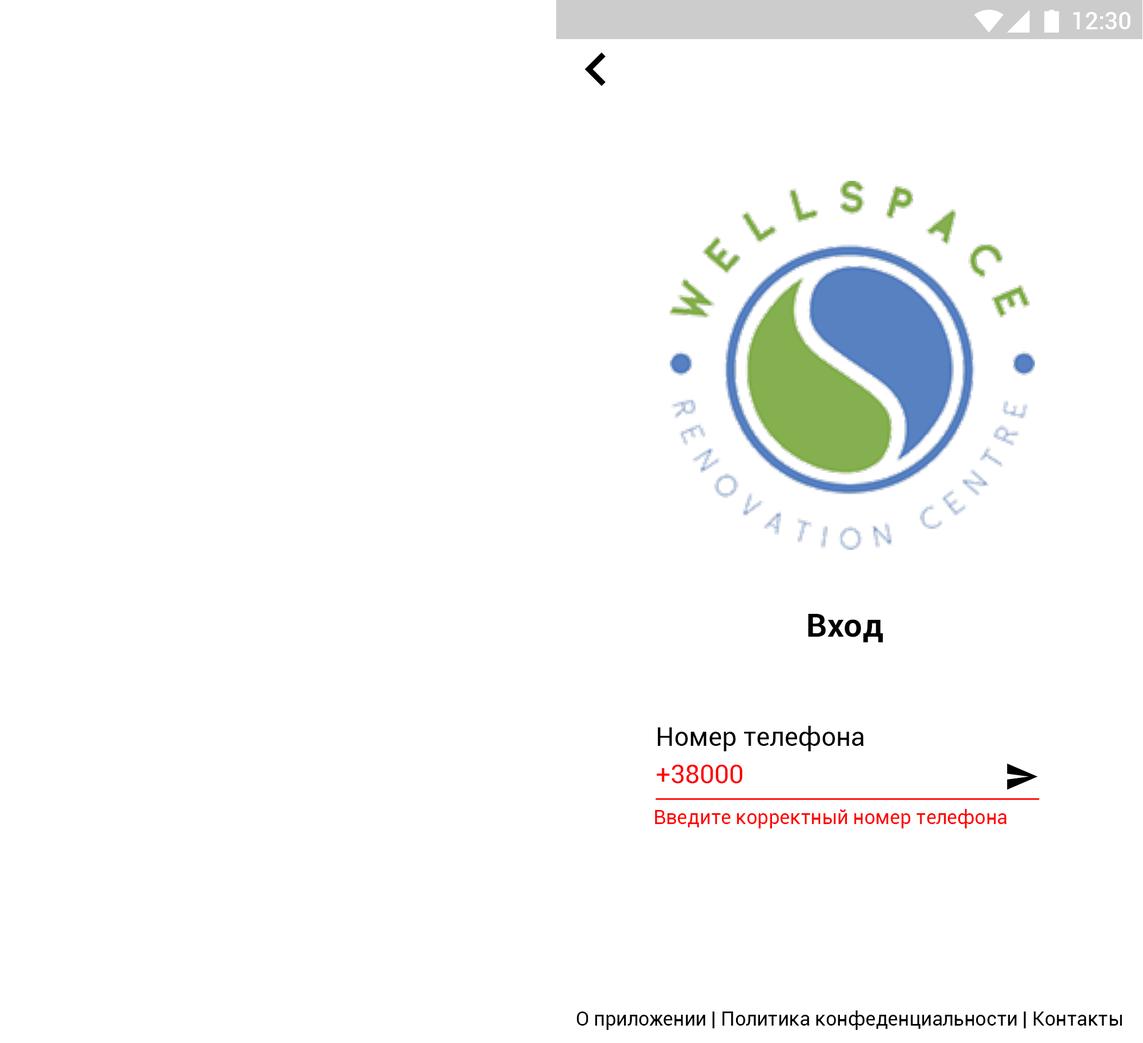
<style>
.page{position:relative;width:1143px;height:1043px;background:#ffffff}
.page>*{position:absolute;margin:0}
.t1{font:23.9px "Roboto-Medium";color:#ffffff}
.t2{font:32.6px "Roboto-Bold";color:#000000}
.t3{font:26.1px "Roboto-Regular";color:#000000}
.t4{font:26.1px "Roboto-Regular";color:#ff0000}
.t5{font:19.6px "Roboto-Regular";color:#ff0000}
.t6{font:19.6px "Roboto-Regular";color:#000000}
</style>
<div class="page">
<p class="t1" style="left:1073px;top:12px;width:58px;height:17px">12:30</p>
<p class="t2" style="left:808px;top:614px;width:75px;height:29px">Вход</p>
<p class="t3" style="left:658px;top:726px;width:206px;height:25px">Номер телефона</p>
<p class="t4" style="left:656px;top:764px;width:87px;height:19px">+38000</p>
<p class="t5" style="left:655px;top:809px;width:352px;height:20px">Введите корректный номер телефона</p>
<p class="t6" style="left:577px;top:1011px;width:545px;height:19px">О приложении | Политика конфеденциальности | Контакты</p>
</div>
